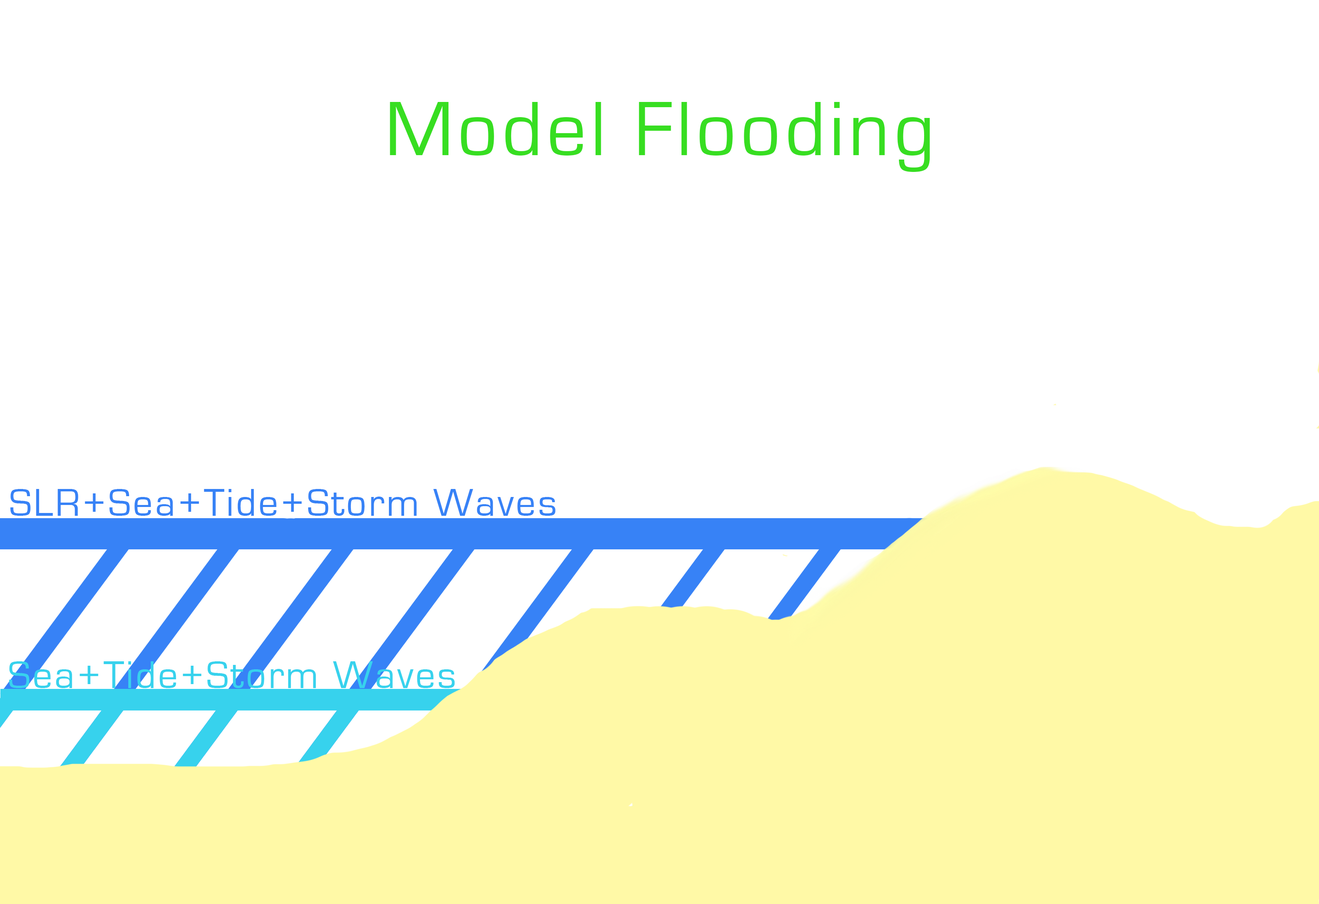
<style>
.page{position:relative;width:1319px;height:904px;background:#ffffff}
.page>*{position:absolute;margin:0}
.t1{font:80px "EurostileRegular";letter-spacing:0.05em;color:#37de21}
.t2{font:40px "EurostileRegular";letter-spacing:0.05em;color:#3782f6}
.t3{font:40px "EurostileRegular";letter-spacing:0.05em;color:#37d2ed}
</style>
<div class="page">
<p class="t1" style="left:390px;top:102px;width:540px;height:70px;text-align:center">Model Flooding<br><br>\</p>
<p class="t2" style="left:10px;top:489px;width:546px;height:27px">SLR+Sea+Tide+Storm Waves</p>
<p class="t3" style="left:9px;top:661px;width:446px;height:27px">Sea+Tide+Storm Waves</p>
</div>
